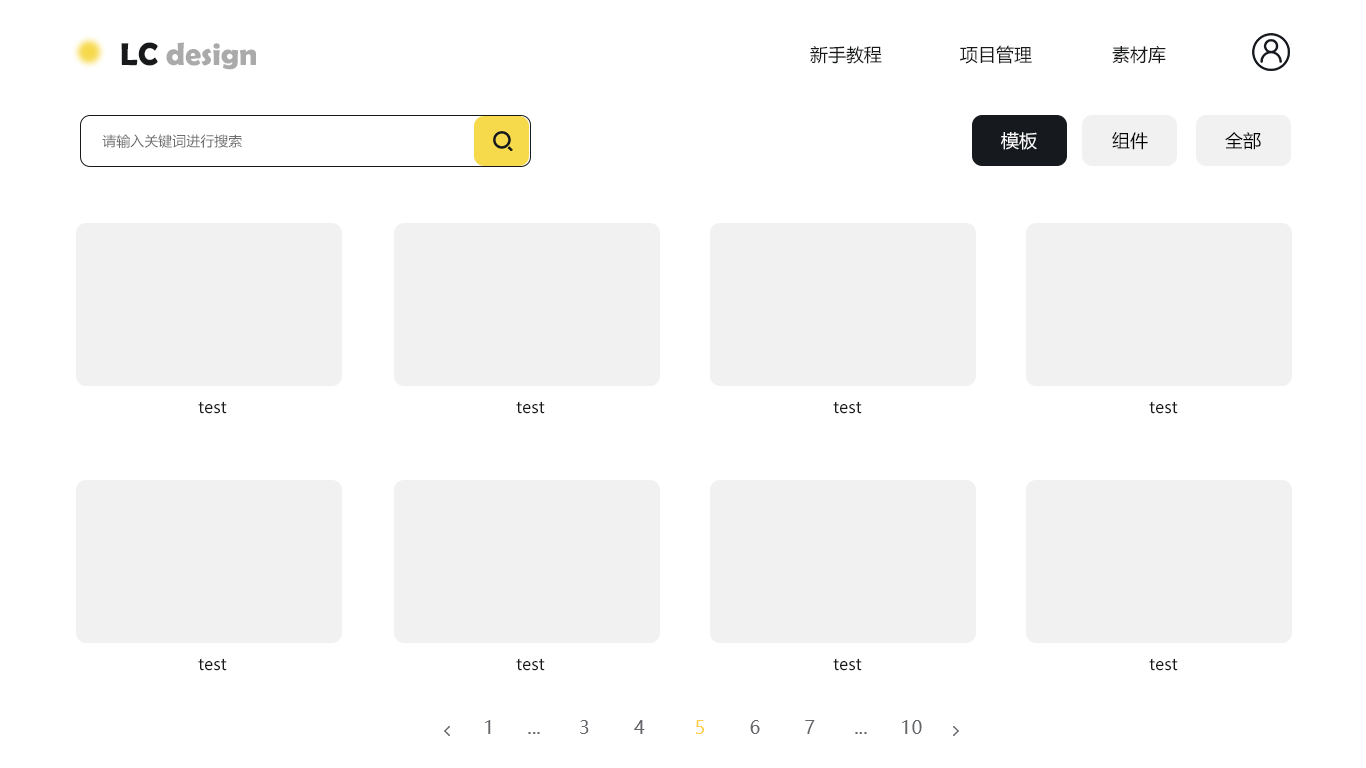
<style>
.page{position:relative;width:1366px;height:768px;background:#ffffff}
.page>*{position:absolute;margin:0}
.t1{font:32px "BerlinSansFBDemi-Bold";color:#aaaaaa}
.t2{font:32px "BerlinSansFBDemi-Bold";color:#17191a}
.t3{font:18px "MicrosoftYaHei";color:#17191a}
.t4{font:14px "MicrosoftYaHei";color:#6d6d6d}
.t5{font:18px "MicrosoftYaHei";color:#fefefe}
.t6{font:18px "MicrosoftYaHei";color:#000000}
.t7{font:16px "MicrosoftYaHei";color:#17191a}
.t8{font:18px "MicrosoftYaHei";letter-spacing:0.025em;color:#646669}
.t9{font:18px "MicrosoftYaHei";letter-spacing:0.025em;color:#ffce4b}
</style>
<div class="page">
<p class="t1" style="left:121px;top:42px;width:135px;height:28px"><span class="t2">LC </span>design</p>
<p class="t3" style="left:810px;top:46px;width:72px;height:18px">新手教程</p>
<p class="t3" style="left:960px;top:45px;width:72px;height:19px">项目管理</p>
<p class="t3" style="left:1112px;top:45px;width:54px;height:19px">素材库</p>
<p class="t4" style="left:102px;top:134px;width:140px;height:14px">请输入关键词进行搜索</p>
<p class="t5" style="left:1001px;top:132px;width:36px;height:18px">模板</p>
<p class="t6" style="left:1112px;top:132px;width:36px;height:18px">组件</p>
<p class="t6" style="left:1225px;top:132px;width:36px;height:18px">全部</p>
<p class="t7" style="left:198px;top:401px;width:29px;height:13px">test</p>
<p class="t7" style="left:516px;top:401px;width:29px;height:13px">test</p>
<p class="t7" style="left:833px;top:401px;width:29px;height:13px">test</p>
<p class="t7" style="left:1149px;top:401px;width:29px;height:13px">test</p>
<p class="t7" style="left:198px;top:658px;width:29px;height:13px">test</p>
<p class="t7" style="left:516px;top:658px;width:29px;height:13px">test</p>
<p class="t7" style="left:833px;top:658px;width:29px;height:13px">test</p>
<p class="t7" style="left:1149px;top:658px;width:29px;height:13px">test</p>
<p class="t8" style="left:485px;top:720px;width:437px;height:14px">1      ...       3        4         <span class="t9">5</span>        6        7       ...      10</p>
</div>
